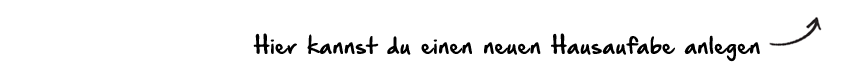
<style>
.page{position:relative;width:850px;height:82px;background:#ffffff}
.page>*{position:absolute;margin:0}
.t1{font:19.4px "HandOfSeanDemo";color:#000000;scale:1.05 1}
</style>
<div class="page">
<p class="t1" style="left:253px;top:33px;width:507px;height:29px">Hier kannst du einen neuen Hausaufabe anlegen</p>
</div>
